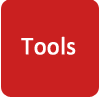
<style>
.page{position:relative;width:100px;height:100px;background:#ca2020}
.page>*{position:absolute;margin:0}
.t1{font:25.2px "Calibri";color:#ffffff;font-weight:bold;scale:0.95 1}
</style>
<div class="page">
<p class="t1" style="left:21px;top:36px;width:55px;height:19px">Tools</p>
</div>
